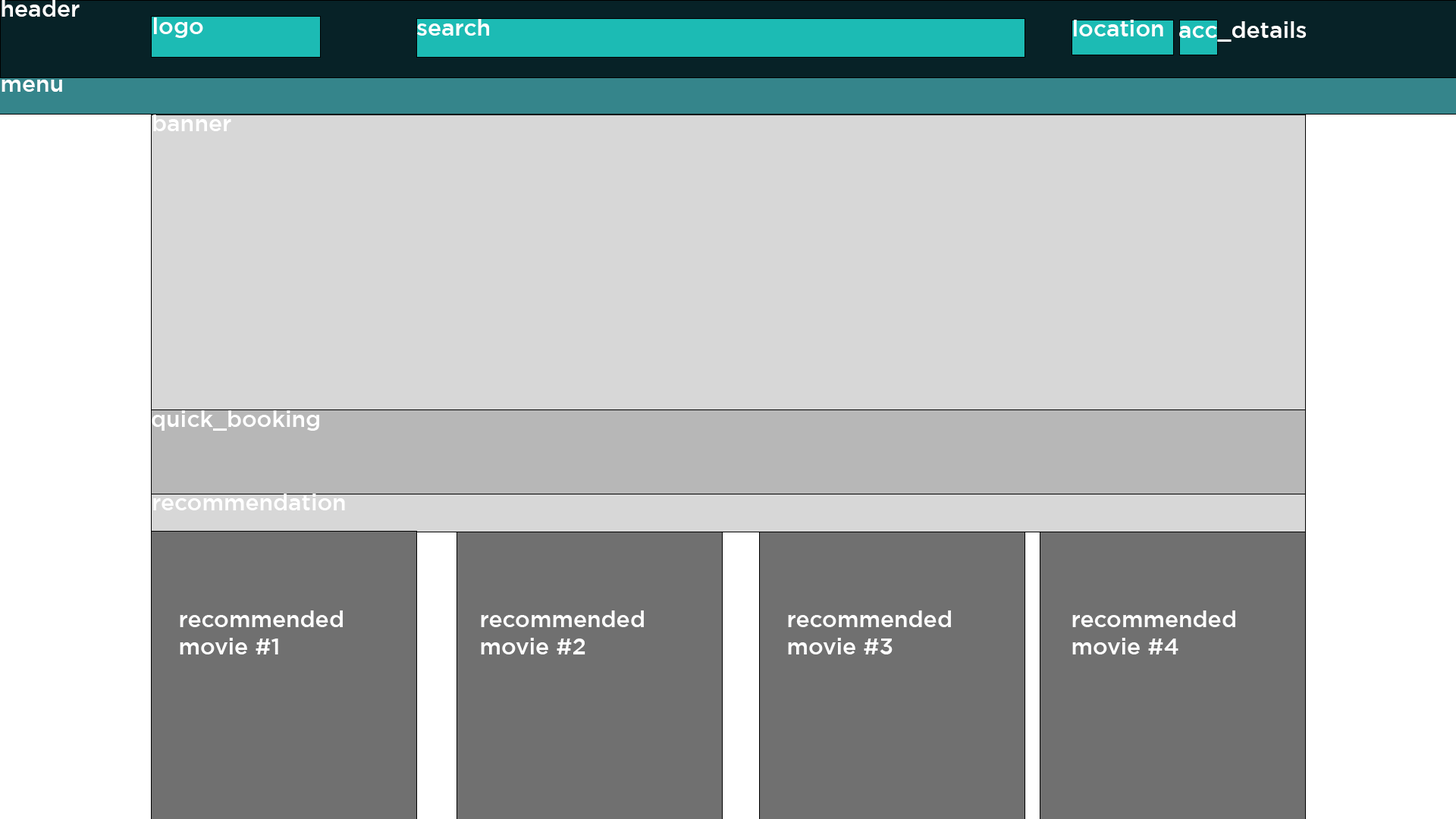
<style>
.page{position:relative;width:1456px;height:819px;background:#d7d7d7}
.page>*{position:absolute;margin:0}
.t1{font:22.7px "Gotham-Medium";color:#ffffff}
</style>
<div class="page">
<p class="t1" style="left:2px;top:0px;width:78px;height:17px">header</p>
<p class="t1" style="left:154px;top:17px;width:49px;height:21px">logo</p>
<p class="t1" style="left:417px;top:19px;width:72px;height:17px">search</p>
<p class="t1" style="left:1074px;top:20px;width:89px;height:16px">location</p>
<p class="t1" style="left:1179px;top:21px;width:128px;height:21px">acc_details</p>
<p class="t1" style="left:2px;top:80px;width:60px;height:12px">menu</p>
<p class="t1" style="left:153px;top:115px;width:78px;height:16px">banner</p>
<p class="t1" style="left:152px;top:410px;width:167px;height:21px">quick_booking</p>
<p class="t1" style="left:153px;top:494px;width:192px;height:16px">recommendation</p>
<p class="t1" style="left:180px;top:610px;width:163px;height:44px">recommended<br>movie #1</p>
<p class="t1" style="left:481px;top:610px;width:163px;height:44px">recommended<br>movie #2</p>
<p class="t1" style="left:788px;top:610px;width:163px;height:44px">recommended<br>movie #3</p>
<p class="t1" style="left:1072px;top:610px;width:163px;height:44px">recommended<br>movie #4</p>
</div>
